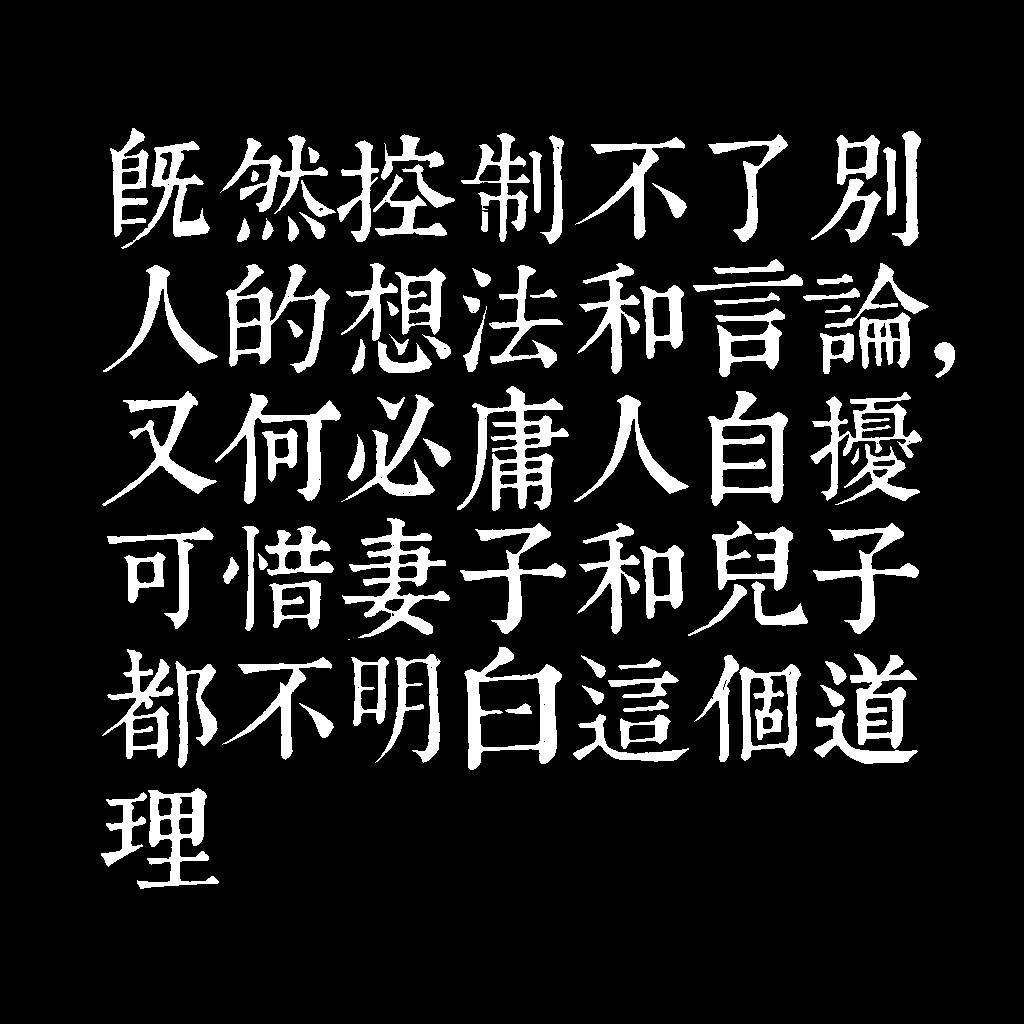
<style>
.page{position:relative;width:1024px;height:1024px;background:#000000}
.page>*{position:absolute;margin:0}
.t1{font:120px/130px "TpldKhangXiDictTrial";letter-spacing:-0.02em;color:#ffffff}
</style>
<div class="page">
<p class="t1" style="left:101px;top:128px;width:854px;height:761px">既然控制不了別<br>人的想法和言論，<br>又何必庸人自擾<br>可惜妻子和兒子<br>都不明白這個道<br>理</p>
</div>
